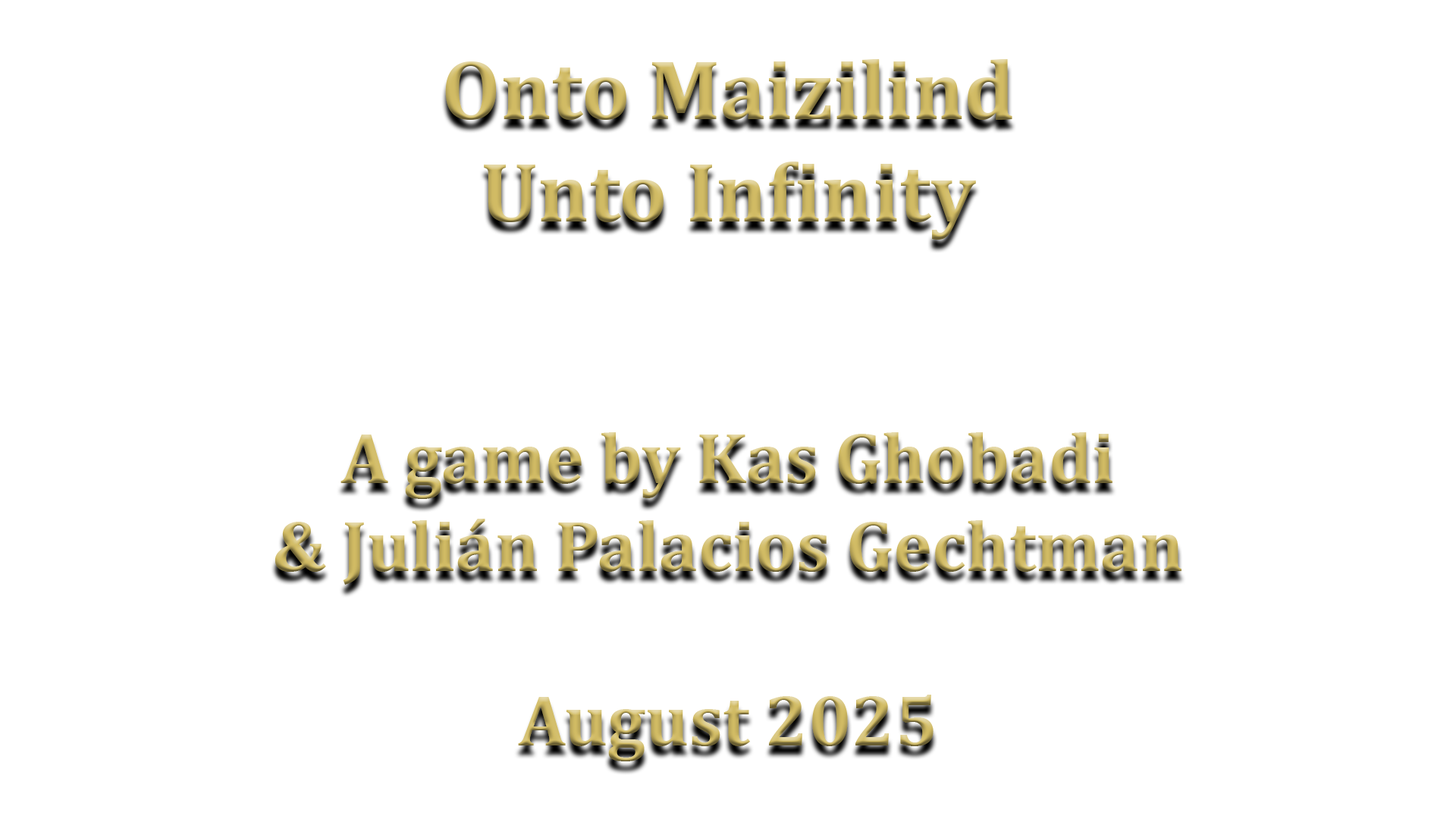
<style>
.page{position:relative;width:1456px;height:819px;background:#ffffff}
.page>*{position:absolute;margin:0}
.t1{font:72.8px "Cambria-Bold"}
.t2{font:84.9px "Cambria-Bold"}
</style>
<div class="page">
<p class="t1" style="left:275px;top:59px;width:906px;height:702px;text-align:center"><span class="t2">Onto Maizilind<br>Unto Infinity<br></span><br><br>A game by Kas Ghobadi<br>&amp; Julián Palacios Gechtman<br><br>August 2025</p>
</div>
